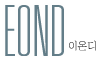
<style>
.page{position:relative;width:101px;height:61px;background:#ffffff}
.page>*{position:absolute;margin:0}
.t1{font:70.6px "Univethiultcon";color:#637d88;scale:0.97 1}
.t2{font:10.8px "Jabmlv50";scale:0.97 1}
</style>
<div class="page">
<p class="t1" style="left:5px;top:5px;width:59px;height:51px">EOND</p>
<p class="t2" style="left:69px;top:40px;width:27px;height:11px">이온디</p>
</div>
